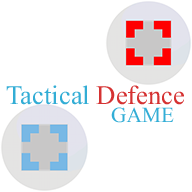
<style>
.page{position:relative;width:192px;height:192px;background:#ffffff}
.page>*{position:absolute;margin:0}
.t1{font:40px "MicrosoftHimalaya";color:#32add6}
.t2{font:40px "MicrosoftHimalaya";color:#d63232}
.t3{font:32px "MicrosoftHimalaya";color:#32add6}
</style>
<div class="page">
<p class="t1" style="left:6px;top:85px;width:178px;height:20px">Tactical <span class="t2">Defence</span></p>
<p class="t3" style="left:111px;top:107px;width:63px;height:16px">GAME</p>
</div>
